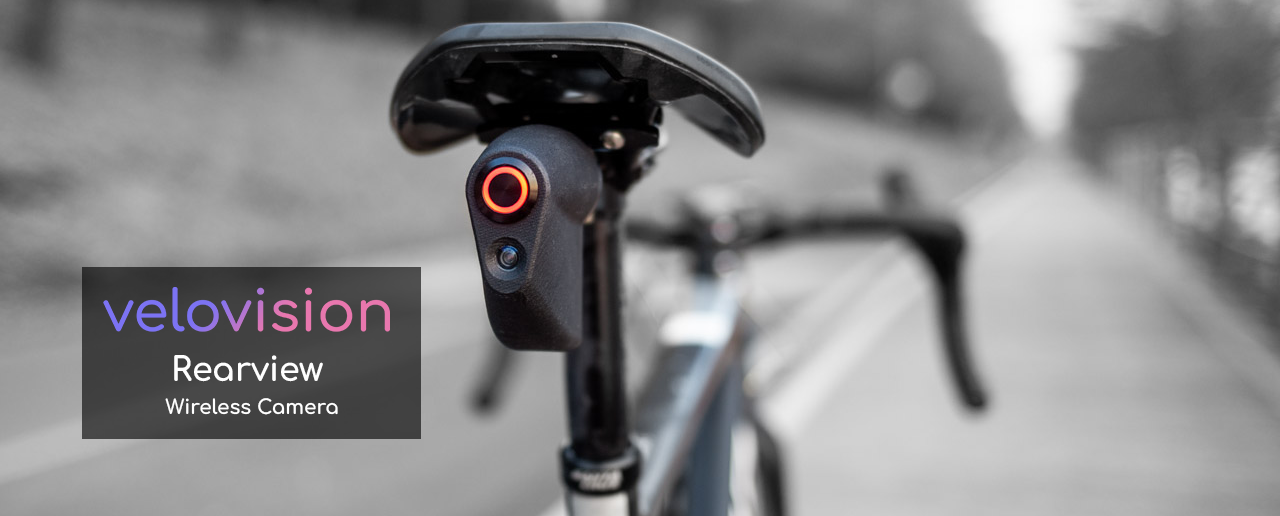
<style>
.page{position:relative;width:1280px;height:516px}
.page>*{position:absolute;margin:0}
.t1{font:20px/33.3px "Comfortaa-Bold";color:#ffffff}
.t2{font:33.3px/33.3px "Comfortaa-Bold";color:#ffffff}
</style>
<div class="page">
<p class="t1" style="left:165px;top:355px;width:173px;height:60px;text-align:center"><span class="t2">Rearview <br></span>Wireless Camera</p>
</div>
